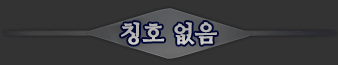
<style>
.page{position:relative;width:338px;height:65px;background:#333333}
.page>*{position:absolute;margin:0}
.t1{font:23px "NanumMyeongjoBold";color:#b4b3b1;font-weight:bold}
</style>
<div class="page">
<p class="t1" style="left:121px;top:22px;width:96px;height:23px">칭호 없음</p>
</div>
